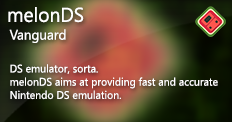
<style>
.page{position:relative;width:232px;height:122px}
.page>*{position:absolute;margin:0}
.t1{font:20px "SegoeUI";color:#ffffff;scale:0.96 1}
.t2{font:14px "SegoeUI";color:#ffffff;scale:0.96 1}
.t3{font:11px "SegoeUI";color:#ffffff;scale:0.96 1}
</style>
<div class="page">
<p class="t1" style="left:8px;top:7px;width:76px;height:16px">melonDS</p>
<p class="t2" style="left:9px;top:29px;width:57px;height:14px">Vanguard</p>
<p class="t3" style="left:10px;top:64px;width:208px;height:36px">DS emulator, sorta. <br>melonDS aims at providing fast and accurate Nintendo DS emulation.</p>
</div>
